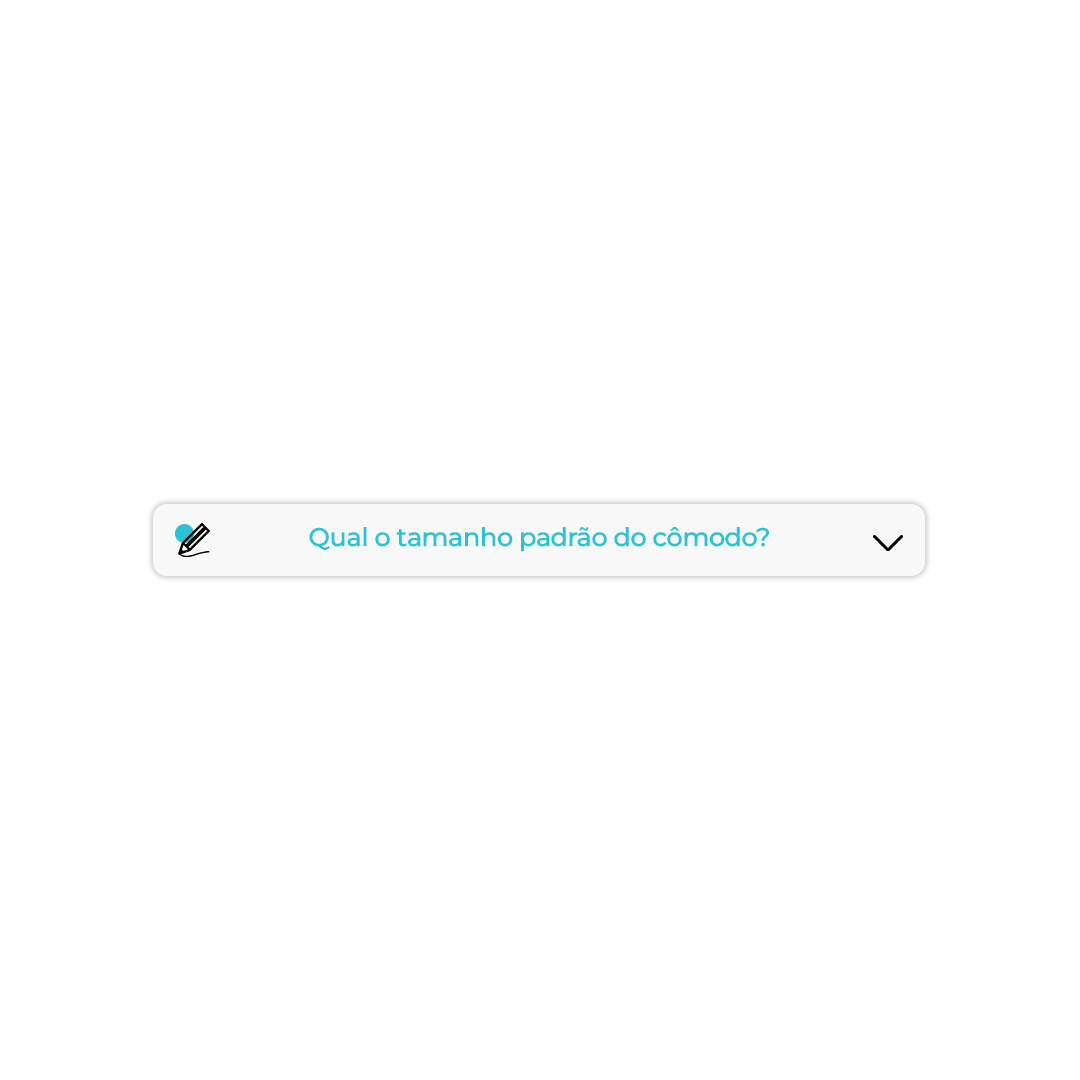
<style>
.page{position:relative;width:1080px;height:1080px;background:#ffffff}
.page>*{position:absolute;margin:0}
.t1{font:25.4px "MontserratRoman-Medium";letter-spacing:-0.015em;color:#29c3d3}
</style>
<div class="page">
<p class="t1" style="left:309px;top:527px;width:460px;height:25px">Qual o tamanho padrão do cômodo?</p>
</div>
